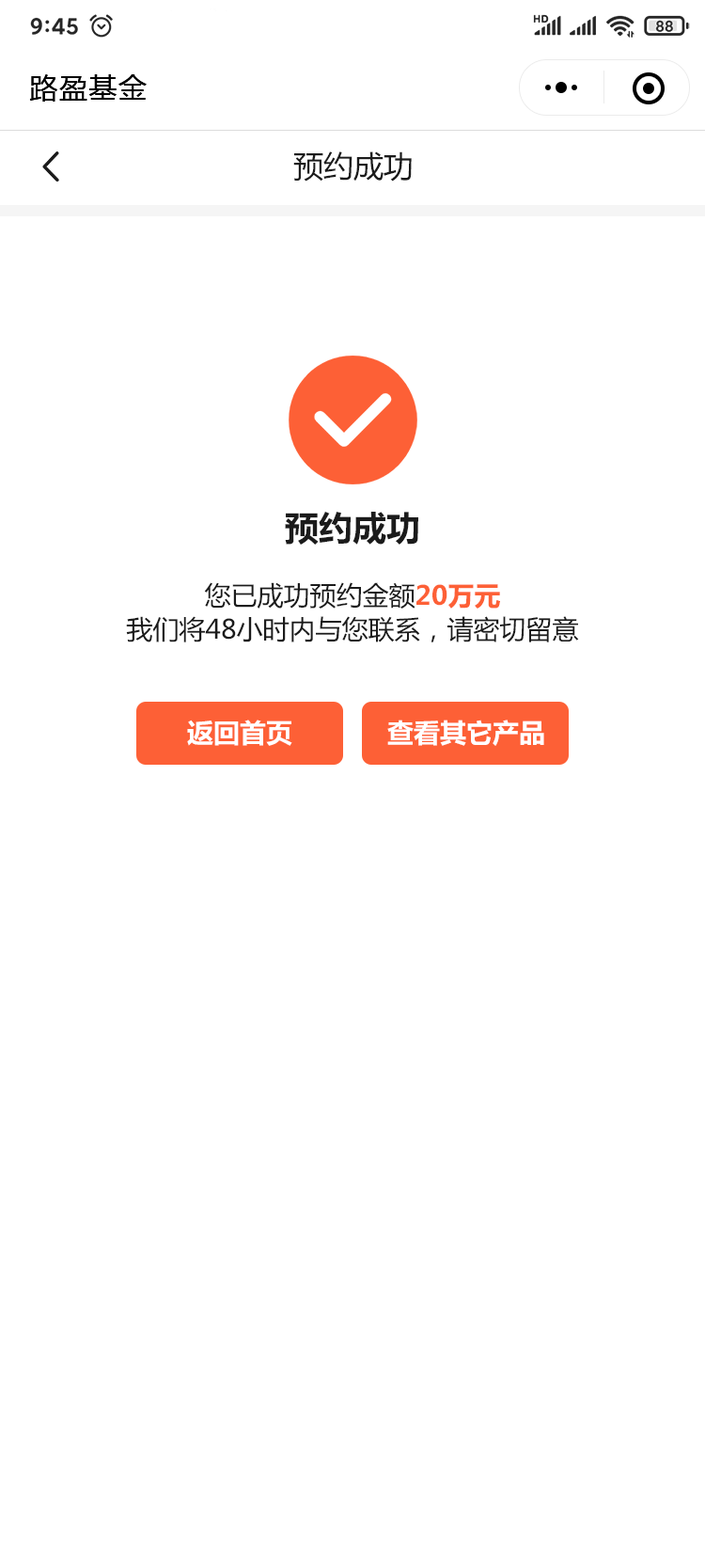
<style>
.page{position:relative;width:705px;height:1568px;background:#ffffff}
.page>*{position:absolute;margin:0}
.t1{font:28.2px "MicrosoftYaHei";letter-spacing:0.05em;color:#000000}
.t2{font:30.1px "MicrosoftYaHei";color:#1b1b1b}
.t3{font:33.9px "MicrosoftYaHei-Bold";color:#1b1b1b}
.t4{font:26.3px/33.9px "MicrosoftYaHei";color:#1b1b1b}
.t5{font:26.3px/33.9px "MicrosoftYaHei-Bold";color:#fd6036}
.t6{font:26.3px "MicrosoftYaHei-Bold";color:#ffffff}
</style>
<div class="page">
<p class="t1" style="left:29px;top:74px;width:118px;height:28px">路盈基金</p>
<p class="t2" style="left:293px;top:151px;width:119px;height:31px">预约成功</p>
<p class="t3" style="left:285px;top:512px;width:134px;height:33px">预约成功</p>
<p class="t4" style="left:126px;top:582px;width:453px;height:60px;text-align:center">您已成功预约金额<span class="t5">20万元<br></span>我们将48小时内与您联系，请密切留意</p>
<p class="t6" style="left:187px;top:720px;width:106px;height:26px">返回首页</p>
<p class="t6" style="left:388px;top:720px;width:157px;height:26px">查看其它产品</p>
</div>
